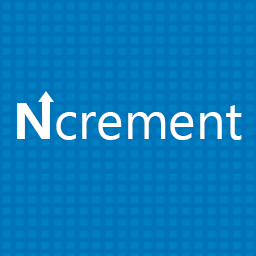
<style>
.page{position:relative;width:256px;height:256px;background:#0073b8}
.page>*{position:absolute;margin:0}
.t1{font:52px "SegoeUI";color:#ffffff}
.t2{font:52px "SegoeUI-Bold";color:#ffffff}
</style>
<div class="page">
<p class="t1" style="left:17px;top:103px;width:225px;height:37px"><span class="t2">N</span>crement</p>
</div>
